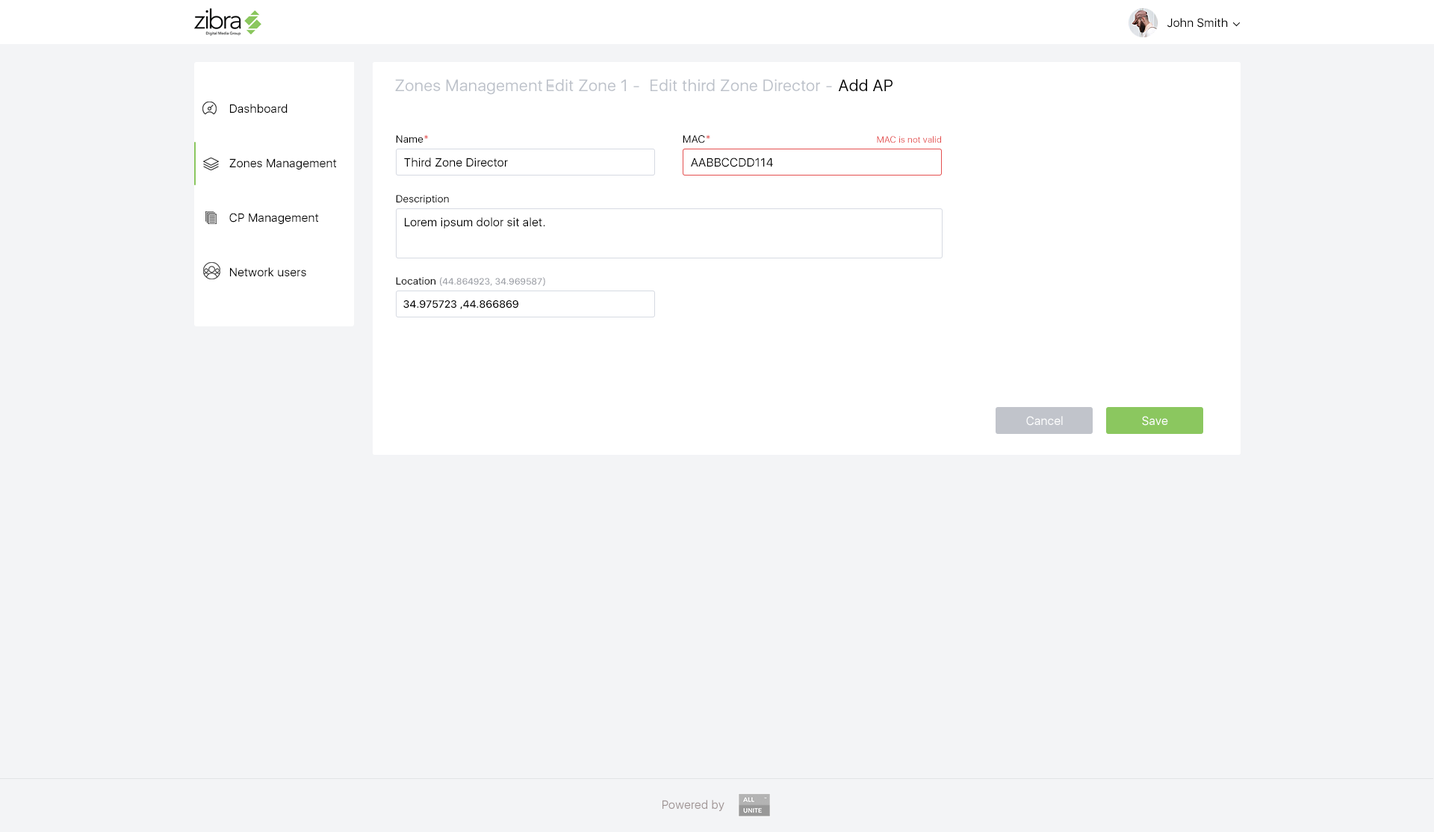
<style>
.page{position:relative;width:1434px;height:832px;background:#f3f4f6}
.page>*{position:absolute;margin:0}
.t1{font:11.9px "SFUIDisplay-Regular";letter-spacing:0.02em;color:#000000}
.t2{font:16.4px "SFUIDisplay-Regular";letter-spacing:0.02em;color:#bdc2ca}
.t3{font:16.4px "SFUIDisplay-Regular";letter-spacing:0.02em;color:#000000}
.t4{font:11.9px/54.5px "SFUIDisplay-Regular";letter-spacing:0.02em;color:#000000}
.t5{font:10.5px "SFUIDisplay-Regular";letter-spacing:0.02em;color:#000000}
.t6{font:10.5px "SFUIDisplay-Regular";letter-spacing:0.02em;color:#e23a3a}
.t7{font:9px "SFUIDisplay-Regular";letter-spacing:0.02em;color:#e44f4f}
.t8{font:9px "SFUIDisplay-Medium";letter-spacing:0.02em;color:#9b9ea5}
.t9{font:10.5px "SFUIDisplay-Regular";letter-spacing:0.02em;color:#9b9ea5}
.t10{font:10.5px "SFUIDisplay-Medium";letter-spacing:0.02em;color:#000000}
.t11{font:11.9px "SFUIDisplay-Regular";letter-spacing:0.02em;color:#ffffff}
.t12{font:11.9px "SFUIDisplay-Regular";letter-spacing:0.02em;color:#a19696}
</style>
<div class="page">
<p class="t1" style="left:1167px;top:18px;width:61px;height:10px">John Smith</p>
<p class="t2" style="left:395px;top:79px;width:159px;height:16px"><span class="t3"> </span>- Zones Management</p>
<p class="t2" style="left:547px;top:79px;width:92px;height:12px">- Edit Zone 1</p>
<p class="t2" style="left:650px;top:79px;width:182px;height:12px">- Edit third Zone Director</p>
<p class="t3" style="left:838px;top:79px;width:54px;height:12px">Add AP</p>
<p class="t4" style="left:229px;top:104px;width:108px;height:172px;text-align:right">Dashboard<br>Zones Management<br>CP Management<br>Network users</p>
<p class="t5" style="left:396px;top:134px;width:32px;height:9px"><span class="t6">*</span>Name</p>
<p class="t5" style="left:682px;top:134px;width:28px;height:9px">*MAC</p>
<p class="t7" style="left:877px;top:136px;width:64px;height:7px">MAC is not valid</p>
<p class="t1" style="left:404px;top:158px;width:104px;height:9px">Third Zone Director</p>
<p class="t1" style="left:691px;top:158px;width:82px;height:9px">AABBCCDD114</p>
<p class="t5" style="left:396px;top:195px;width:53px;height:10px">Description</p>
<p class="t1" style="left:405px;top:217px;width:140px;height:11px">.Lorem ipsum dolor sit alet</p>
<p class="t8" style="left:396px;top:277px;width:149px;height:9px"><span class="t9"> (</span><span class="t5">Location </span><span class="t9">(</span>44.864923, 34.969587</p>
<p class="t10" style="left:403px;top:300px;width:115px;height:9px">44.866869, 34.975723</p>
<p class="t11" style="left:1026px;top:416px;width:36px;height:10px">Cancel</p>
<p class="t11" style="left:1142px;top:416px;width:26px;height:10px">Save</p>
<p class="t12" style="left:662px;top:800px;width:62px;height:11px">Powered by</p>
</div>
